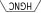
<style>
.page{position:relative;width:41px;height:13px;background:#fefefe}
.page>*{position:absolute;margin:0}
.t1{font:10px "Tahoma";letter-spacing:0.025em;color:#000000;scale:0.85 1}
</style>
<div class="page">
<p class="t1" style="left:9px;top:0px;width:23px;height:11px;rotate:180deg">HGNC</p>
</div>
